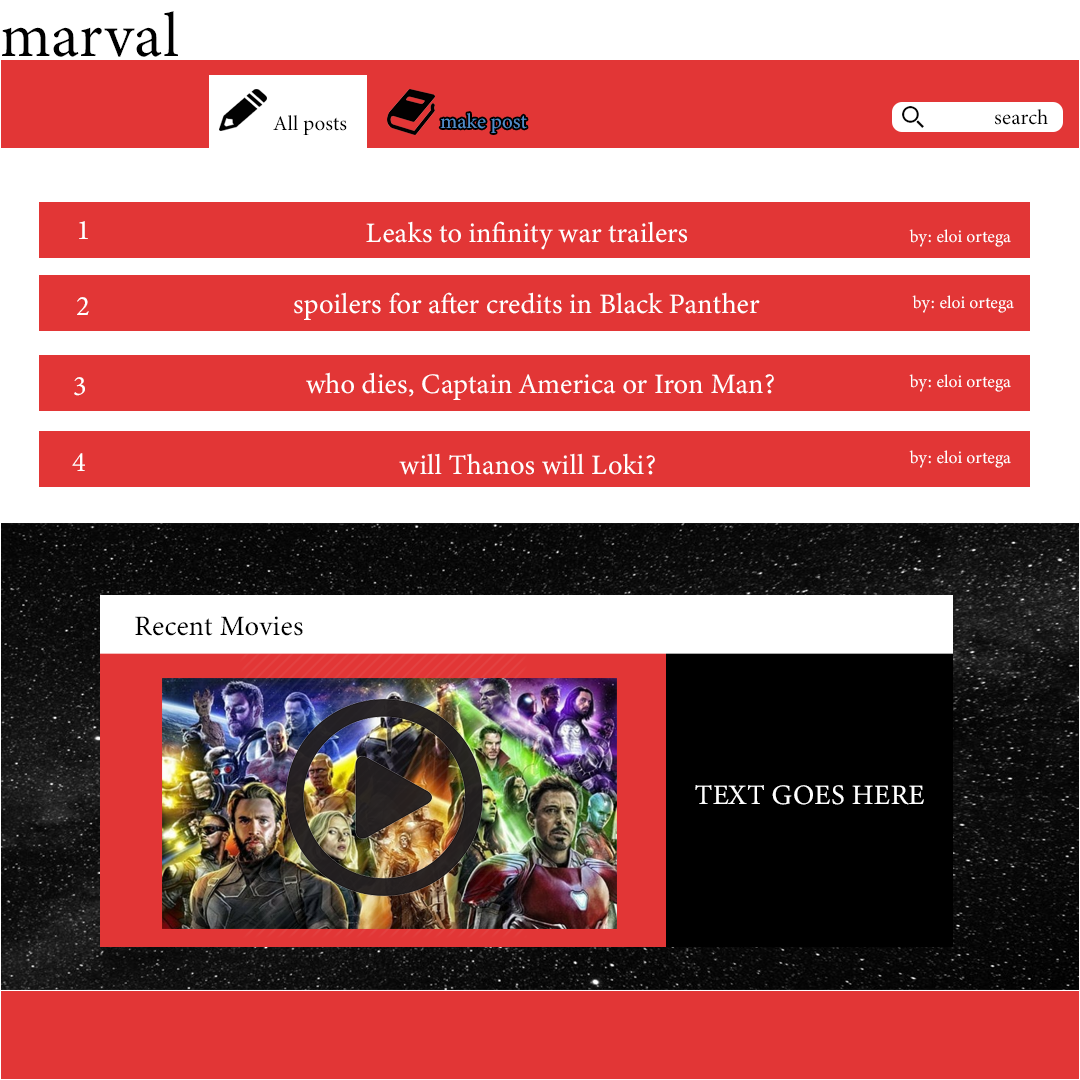
<style>
.page{position:relative;width:1080px;height:1080px;background:#e23636}
.page>*{position:absolute;margin:0}
.t1{font:62.5px "MinionVariableConcept-Roman";letter-spacing:0.001em;color:#000000}
.t2{font:20.8px "MinionVariableConcept-Roman";letter-spacing:0.001em;color:#518cca}
.t3{font:20.8px "MinionVariableConcept-Roman";letter-spacing:0.001em;color:#000000}
.t4{font:28.2px "MinionVariableConcept-Roman";letter-spacing:0.001em;color:#ffffff}
.t5{font:17.4px "MinionVariableConcept-Roman";letter-spacing:0.001em;color:#ffffff}
.t6{font:28.2px "MinionVariableConcept-Roman";letter-spacing:0.001em;color:#000000}
</style>
<div class="page">
<p class="t1" style="left:2px;top:11px;width:176px;height:46px">marval</p>
<p class="t2" style="left:440px;top:113px;width:87px;height:20px">make post</p>
<p class="t3" style="left:994px;top:109px;width:54px;height:16px">search</p>
<p class="t3" style="left:273px;top:115px;width:74px;height:20px">All posts</p>
<p class="t4" style="left:79px;top:221px;width:9px;height:18px">1</p>
<p class="t4" style="left:366px;top:221px;width:321px;height:29px">Leaks to infinity war trailers</p>
<p class="t5" style="left:909px;top:229px;width:102px;height:18px">by: eloi ortega</p>
<p class="t4" style="left:294px;top:292px;width:466px;height:28px">spoilers for after credits in Black Panther</p>
<p class="t4" style="left:77px;top:297px;width:12px;height:18px">2</p>
<p class="t5" style="left:912px;top:295px;width:102px;height:18px">by: eloi ortega</p>
<p class="t4" style="left:74px;top:377px;width:11px;height:19px">3</p>
<p class="t4" style="left:306px;top:372px;width:468px;height:28px">who dies, Captain America or Iron Man?</p>
<p class="t5" style="left:909px;top:374px;width:102px;height:18px">by: eloi ortega</p>
<p class="t4" style="left:72px;top:453px;width:13px;height:18px">4</p>
<p class="t4" style="left:399px;top:453px;width:256px;height:22px">will Thanos will Loki?</p>
<p class="t5" style="left:909px;top:450px;width:102px;height:18px">by: eloi ortega</p>
<p class="t6" style="left:135px;top:616px;width:168px;height:20px">Recent Movies</p>
<p class="t4" style="left:695px;top:785px;width:229px;height:20px">TEXT GOES HERE</p>
</div>
